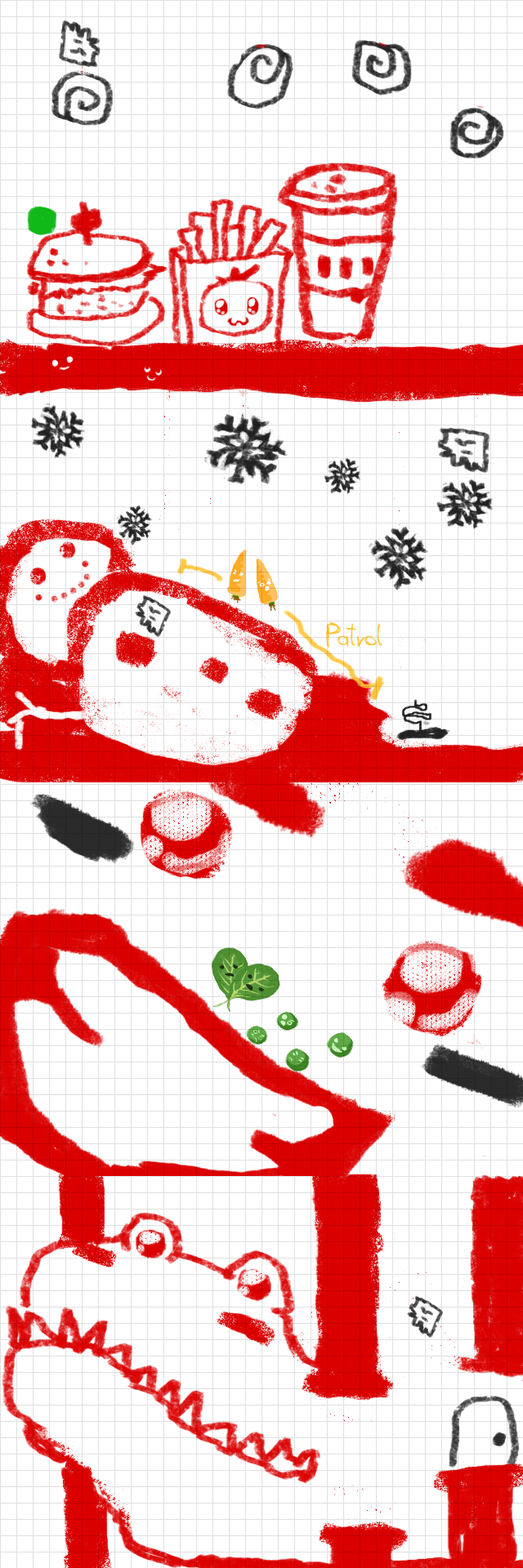
<style>
.page{position:relative;width:523px;height:1568px;background:#ffffff}
.page>*{position:absolute;margin:0}
.t1{font:29.4px "Daubed";color:#ffc53a}
</style>
<div class="page">
<p class="t1" style="left:326px;top:622px;width:56px;height:26px">Patrol</p>
</div>
